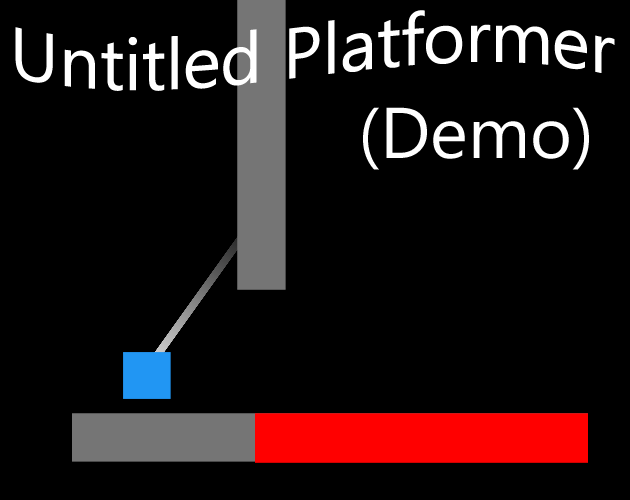
<style>
.page{position:relative;width:630px;height:500px;background:#000000}
.page>*{position:absolute;margin:0}
.t1{font:71.7px "NirmalaUI";color:#ffffff}
</style>
<div class="page">
<p class="t1" style="left:15px;top:10px;width:600px;height:81px">Untitled Platformer</p>
<p class="t1" style="left:363px;top:107px;width:226px;height:63px">(Demo)</p>
</div>
